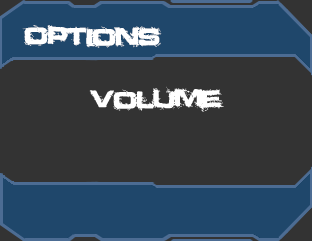
<style>
.page{position:relative;width:312px;height:241px;background:#333333}
.page>*{position:absolute;margin:0}
.t1{font:24px "Defused-ExtendedBold";color:#ffffff}
</style>
<div class="page">
<p class="t1" style="left:22px;top:25px;width:140px;height:23px">Options</p>
<p class="t1" style="left:89px;top:86px;width:135px;height:26px">Volume</p>
</div>
